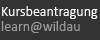
<style>
.page{position:relative;width:100px;height:40px;background:#333333}
.page>*{position:absolute;margin:0}
.t1{font:14px "Calibri";color:#ffffff}
.t2{font:14px "Calibri";color:#9a9a9a}
</style>
<div class="page">
<p class="t1" style="left:2px;top:6px;width:96px;height:13px">Kursbeantragung</p>
<p class="t2" style="left:1px;top:21px;width:79px;height:12px">learn@wildau</p>
</div>
